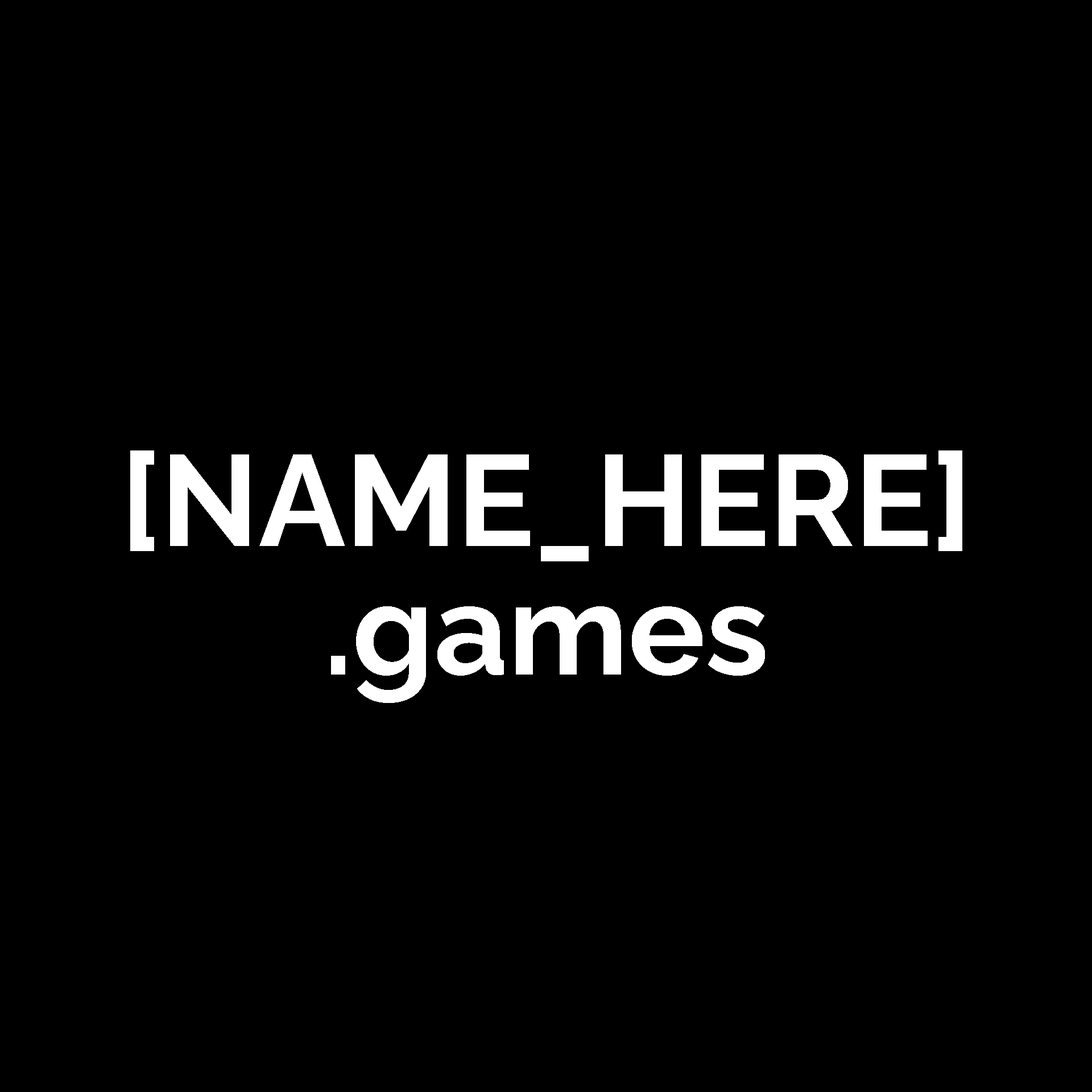
<style>
.page{position:relative;width:1092px;height:1092px;background:#000000}
.page>*{position:absolute;margin:0}
.t1{font:128.9px/128.9px "RalewayRoman-Bold";color:#ffffff}
</style>
<div class="page">
<p class="t1" style="left:130px;top:450px;width:832px;height:253px;text-align:center">[NAME_HERE]<br>.games</p>
</div>
